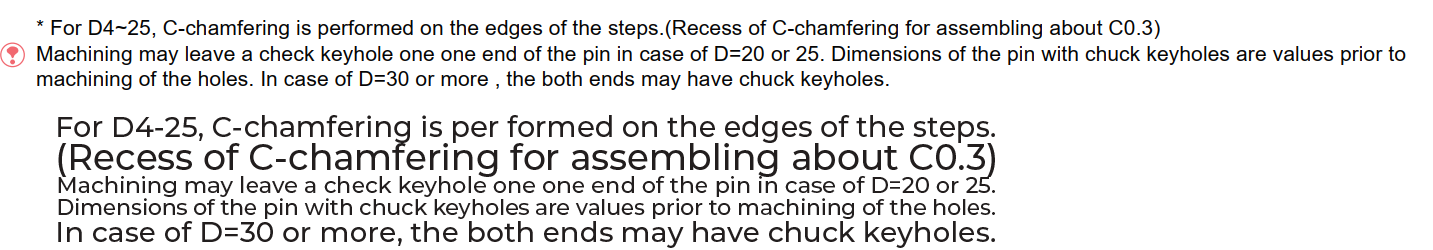
<style>
.page{position:relative;width:1433px;height:250px;background:#ffffff}
.page>*{position:absolute;margin:0}
.t1{font:21.3px "Montserrat-Medium";color:#221e1e}
</style>
<div class="page">
<p class="t1" style="left:58px;top:115px;width:937px;height:133px">For D4-25, C-chamfering is per formed on the edges of the steps.<br>(Recess of C-chamfering for assembling about C0.3)<br>Machining may leave a check keyhole one one end of the pin in case of D=20 or 25.<br>Dimensions of the pin with chuck keyholes are values prior to machining of the holes.<br>In case of D=30 or more, the both ends may have chuck keyholes.</p>
</div>
